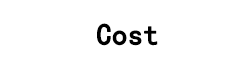
<style>
.page{position:relative;width:250px;height:70px;background:#ffffff}
.page>*{position:absolute;margin:0}
.t1{font:30px "SimHei";color:#000000;font-weight:bold}
</style>
<div class="page">
<p class="t1" style="left:97px;top:23px;width:61px;height:23px">Cost</p>
</div>
